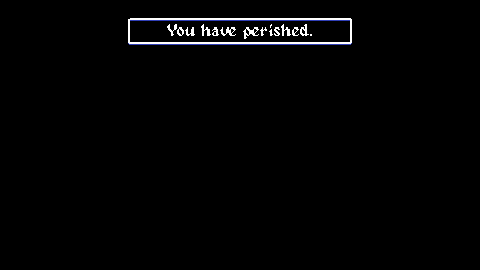
<style>
.page{position:relative;width:480px;height:270px;background:#000000}
.page>*{position:absolute;margin:0}
.t1{font:16.7px "Alagard";color:#ffffff}
</style>
<div class="page">
<p class="t1" style="left:167px;top:24px;width:145px;height:15px">You have perished.</p>
</div>
